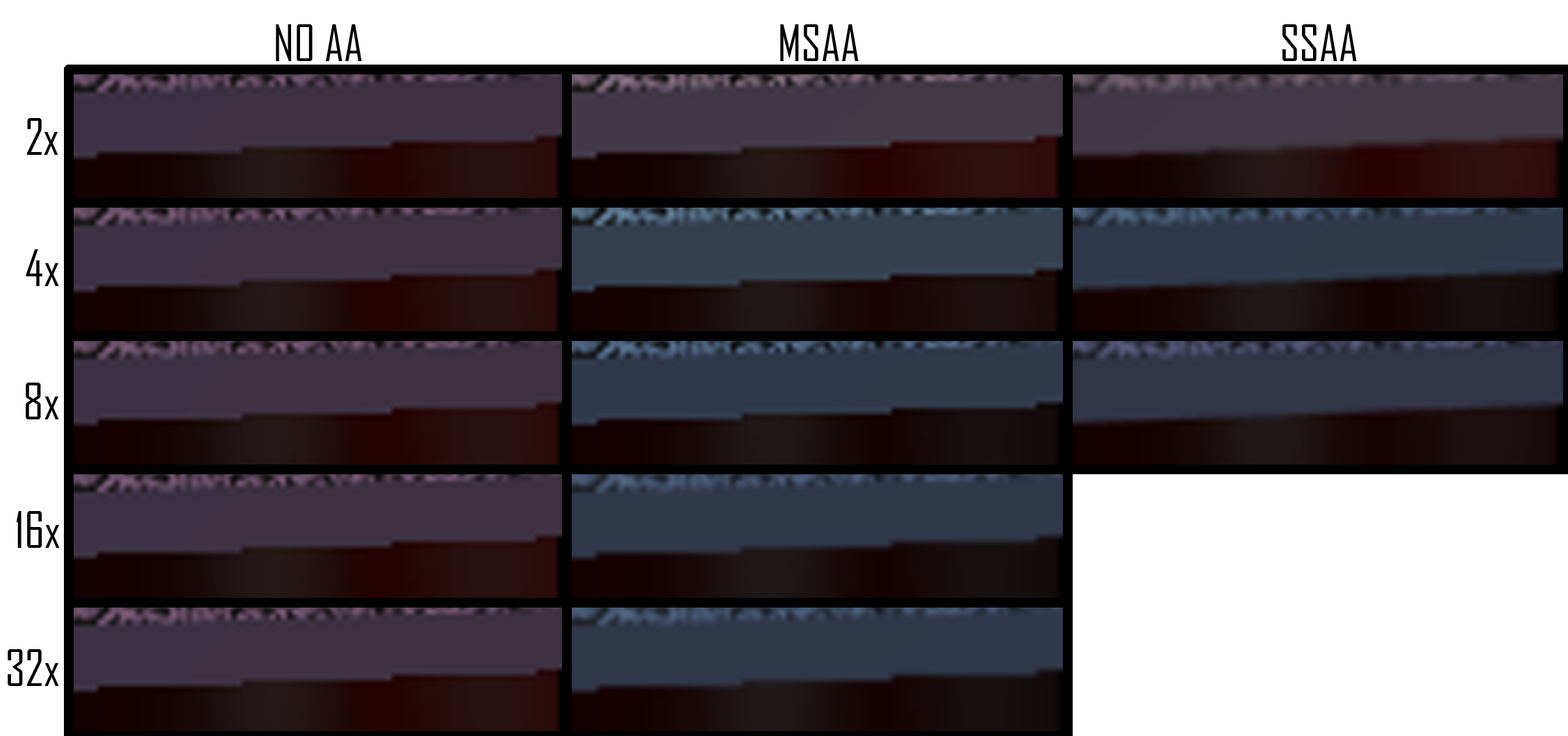
<style>
.page{position:relative;width:1568px;height:736px;background:#ffffff}
.page>*{position:absolute;margin:0}
.t1{font:47.9px "AgencyFB-Reg";color:#000000}
</style>
<div class="page">
<p class="t1" style="left:276px;top:24px;width:86px;height:37px">NO AA</p>
<p class="t1" style="left:780px;top:24px;width:79px;height:37px">MSAA</p>
<p class="t1" style="left:1282px;top:24px;width:75px;height:37px">SSAA</p>
<p class="t1" style="left:26px;top:118px;width:32px;height:37px">2x</p>
<p class="t1" style="left:26px;top:249px;width:33px;height:37px">4x</p>
<p class="t1" style="left:26px;top:383px;width:33px;height:37px">8x</p>
<p class="t1" style="left:16px;top:511px;width:44px;height:37px">16x</p>
<p class="t1" style="left:8px;top:650px;width:51px;height:36px">32x</p>
</div>
